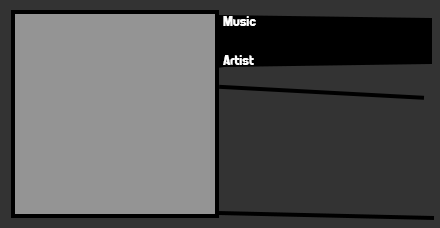
<style>
.page{position:relative;width:440px;height:228px;background:#333333}
.page>*{position:absolute;margin:0}
.t1{font:14px "PiratesofCydonia";color:#ffffff}
</style>
<div class="page">
<p class="t1" style="left:223px;top:16px;width:33px;height:10px">Music</p>
<p class="t1" style="left:223px;top:55px;width:31px;height:10px">Artist</p>
</div>
